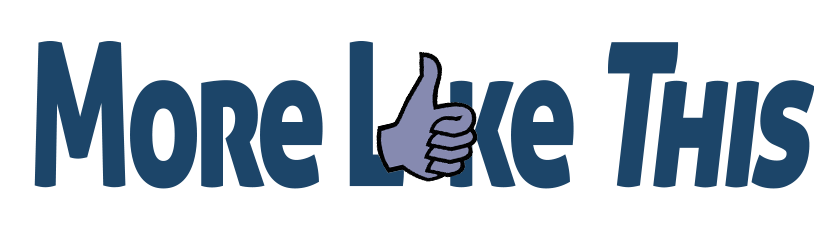
<style>
.page{position:relative;width:814px;height:233px;background:#ffffff}
.page>*{position:absolute;margin:0}
.t1{font:200px "AllerDisplay";letter-spacing:-0.05em;color:#1d4569;scale:0.65 1}
.t2{font:200px "AllerDisplay";letter-spacing:-0.05em;color:#1d4569;font-style:italic;scale:0.65 1}
</style>
<div class="page">
<p class="t1" style="left:34px;top:41px;width:781px;height:148px">More L  ke <span class="t2">This</span></p>
</div>
